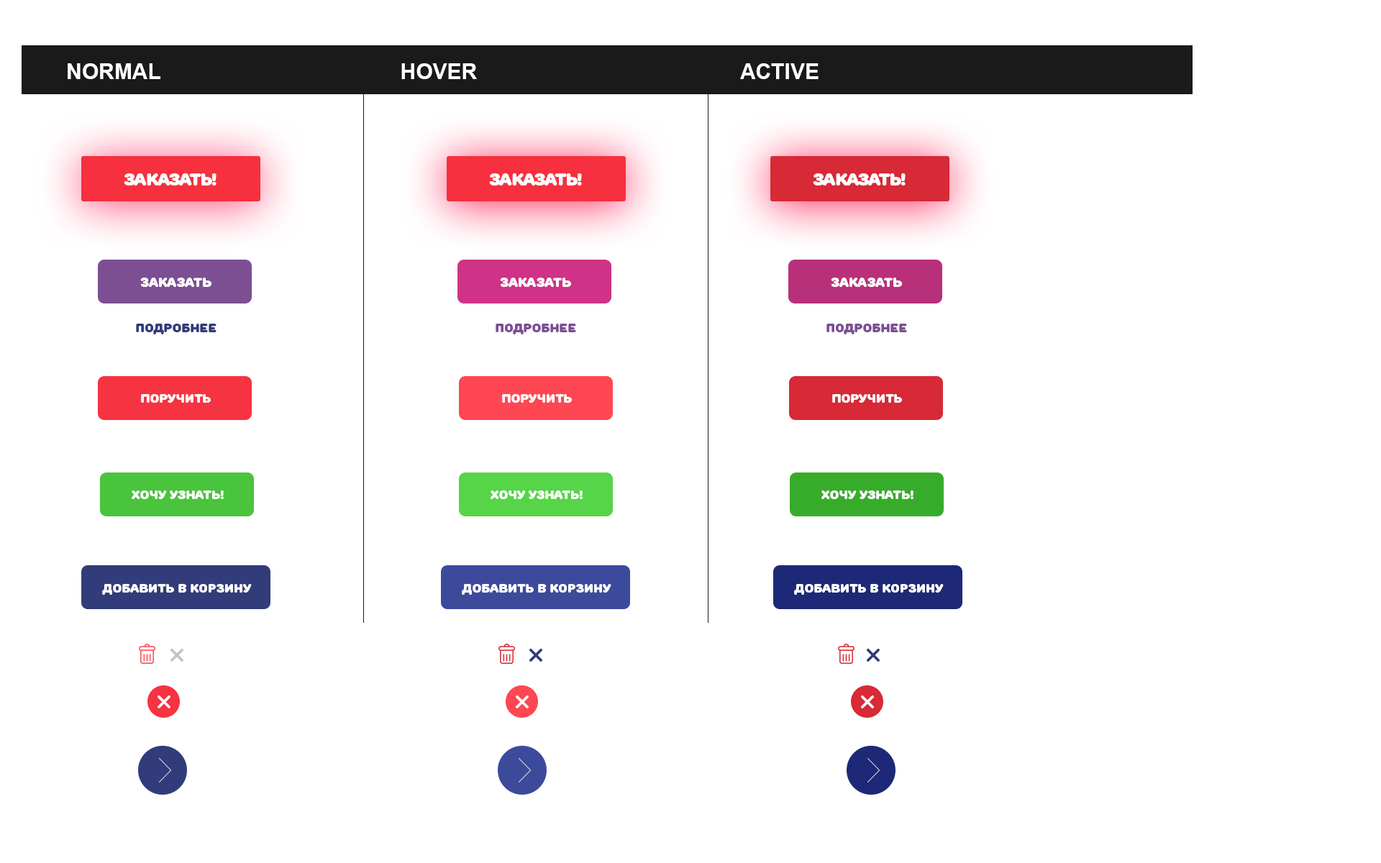
<style>
.page{position:relative;width:1381px;height:863px;background:#ffffff}
.page>*{position:absolute;margin:0}
.t1{font:21.6px "Arial-BoldMT";color:#ffffff;text-transform:uppercase}
.t2{font:17.3px "RoundsBlack";letter-spacing:-0.05em;color:#ffffff;text-transform:uppercase}
.t3{font:12.9px "RoundsBlack";color:#ffffff}
.t4{font:12.2px "RoundsBlack";color:#323c7a}
.t5{font:12.2px "RoundsBlack";color:#7c4f93}
.t6{font:12.2px "RoundsBlack";color:#ffffff}
.t7{font:12.2px "RoundsBlack";color:#ffffff;text-transform:uppercase}
</style>
<div class="page">
<p class="t1" style="left:68px;top:63px;width:751px;height:16px">Normal                                        hover                                            ACTIVE</p>
<p class="t2" style="left:124px;top:173px;width:93px;height:13px">Заказать!</p>
<p class="t2" style="left:489px;top:173px;width:93px;height:13px">Заказать!</p>
<p class="t2" style="left:813px;top:173px;width:93px;height:13px">Заказать!</p>
<p class="t3" style="left:140px;top:278px;width:72px;height:9px">заказать</p>
<p class="t3" style="left:500px;top:278px;width:71px;height:9px">заказать</p>
<p class="t3" style="left:831px;top:278px;width:71px;height:9px">заказать</p>
<p class="t4" style="left:136px;top:324px;width:81px;height:11px">подробнее</p>
<p class="t5" style="left:496px;top:324px;width:80px;height:11px">подробнее</p>
<p class="t5" style="left:827px;top:324px;width:80px;height:11px">подробнее</p>
<p class="t6" style="left:141px;top:394px;width:70px;height:9px">поручить</p>
<p class="t6" style="left:502px;top:394px;width:70px;height:9px">поручить</p>
<p class="t6" style="left:832px;top:394px;width:70px;height:9px">поручить</p>
<p class="t6" style="left:132px;top:491px;width:92px;height:8px">хочу узнать!</p>
<p class="t6" style="left:491px;top:491px;width:92px;height:8px">хочу узнать!</p>
<p class="t6" style="left:822px;top:491px;width:92px;height:8px">хочу узнать!</p>
<p class="t7" style="left:102px;top:584px;width:150px;height:11px">добавить в корзину</p>
<p class="t7" style="left:462px;top:584px;width:149px;height:11px">добавить в корзину</p>
<p class="t7" style="left:794px;top:584px;width:150px;height:11px">добавить в корзину</p>
</div>
